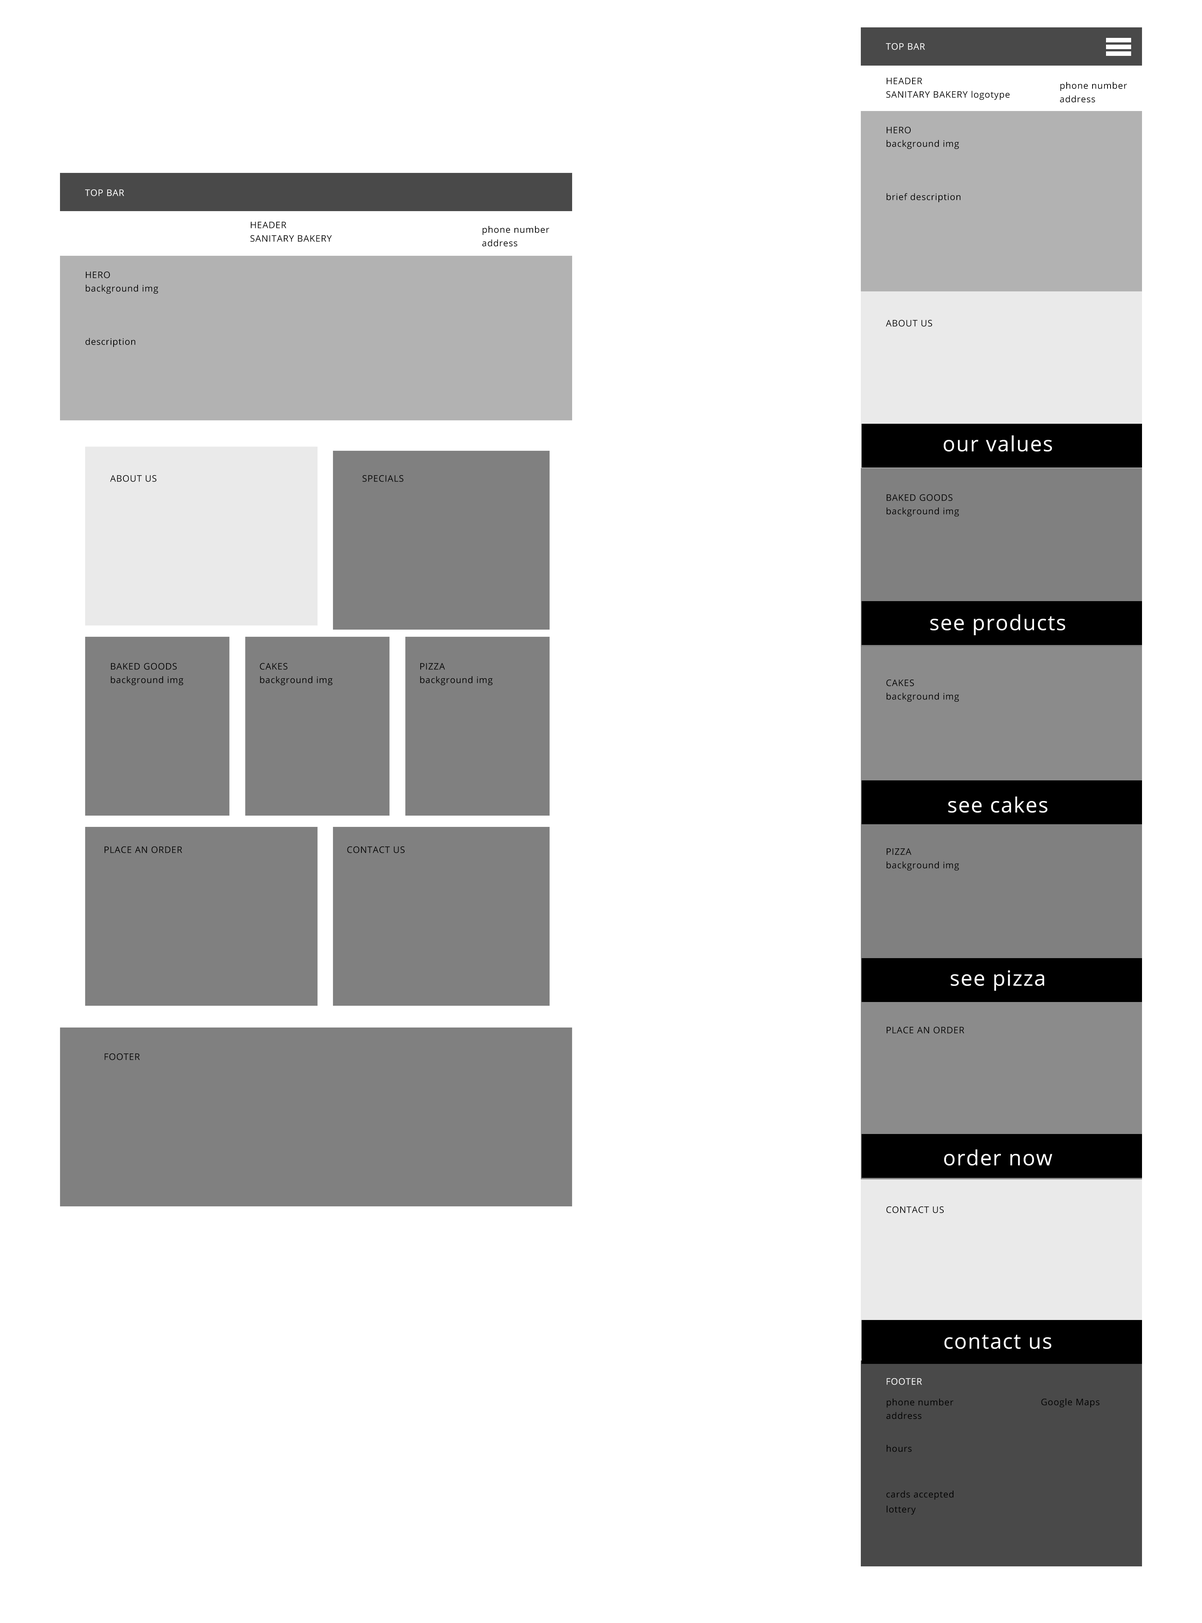
<style>
.page{position:relative;width:1202px;height:1623px;background:#ffffff}
.page>*{position:absolute;margin:0}
.t1{font:9px "OpenSans";letter-spacing:0.045em;color:#ffffff}
.t2{font:9px/13.5px "OpenSans";letter-spacing:0.045em;color:#000000}
.t3{font:9px "OpenSans";letter-spacing:0.045em;color:#000000}
.t4{font:21px "OpenSans";letter-spacing:0.045em;color:#ffffff}
</style>
<div class="page">
<p class="t1" style="left:886px;top:43px;width:39px;height:7px">TOP BAR</p>
<p class="t2" style="left:887px;top:78px;width:123px;height:22px">HEADER<br>SANITARY BAKERY logotype</p>
<p class="t2" style="left:1060px;top:82px;width:67px;height:20px">phone number<br>address</p>
<p class="t2" style="left:887px;top:127px;width:72px;height:22px">HERO<br>background img</p>
<p class="t1" style="left:85px;top:189px;width:39px;height:7px">TOP BAR</p>
<p class="t3" style="left:887px;top:193px;width:74px;height:10px">brief description</p>
<p class="t2" style="left:251px;top:222px;width:81px;height:20px">HEADER<br>SANITARY BAKERY</p>
<p class="t2" style="left:482px;top:226px;width:67px;height:20px">phone number<br>address</p>
<p class="t2" style="left:86px;top:272px;width:72px;height:22px">HERO<br>background img</p>
<p class="t3" style="left:886px;top:320px;width:46px;height:7px">ABOUT US</p>
<p class="t3" style="left:86px;top:338px;width:49px;height:9px">description</p>
<p class="t4" style="left:944px;top:435px;width:108px;height:17px">our values</p>
<p class="t3" style="left:110px;top:475px;width:46px;height:7px">ABOUT US</p>
<p class="t3" style="left:363px;top:475px;width:41px;height:7px">SPECIALS</p>
<p class="t2" style="left:887px;top:494px;width:72px;height:23px">BAKED GOODS<br>background img</p>
<p class="t4" style="left:930px;top:614px;width:135px;height:21px">see products</p>
<p class="t2" style="left:111px;top:663px;width:72px;height:23px">BAKED GOODS<br>background img</p>
<p class="t2" style="left:260px;top:663px;width:73px;height:23px">CAKES<br>background img</p>
<p class="t2" style="left:420px;top:663px;width:73px;height:23px">PIZZA<br>background img</p>
<p class="t2" style="left:887px;top:680px;width:72px;height:22px">CAKES<br>background img</p>
<p class="t4" style="left:948px;top:797px;width:100px;height:16px">see cakes</p>
<p class="t3" style="left:105px;top:846px;width:77px;height:7px">PLACE AN ORDER</p>
<p class="t3" style="left:347px;top:846px;width:58px;height:7px">CONTACT US</p>
<p class="t2" style="left:887px;top:848px;width:72px;height:23px">PIZZA<br>background img</p>
<p class="t4" style="left:951px;top:970px;width:93px;height:21px">see pizza</p>
<p class="t3" style="left:887px;top:1027px;width:78px;height:7px">PLACE AN ORDER</p>
<p class="t3" style="left:105px;top:1053px;width:35px;height:7px">FOOTER</p>
<p class="t4" style="left:944px;top:1149px;width:109px;height:17px">order now</p>
<p class="t3" style="left:887px;top:1206px;width:57px;height:7px">CONTACT US</p>
<p class="t4" style="left:945px;top:1335px;width:107px;height:14px">contact us</p>
<p class="t1" style="left:887px;top:1378px;width:35px;height:7px">FOOTER</p>
<p class="t2" style="left:887px;top:1398px;width:67px;height:21px">phone number<br>address</p>
<p class="t3" style="left:1041px;top:1398px;width:59px;height:9px">Google Maps</p>
<p class="t3" style="left:887px;top:1445px;width:25px;height:7px">hours</p>
<p class="t3" style="left:887px;top:1491px;width:67px;height:9px">cards accepted</p>
<p class="t3" style="left:887px;top:1506px;width:29px;height:9px">lottery</p>
</div>
